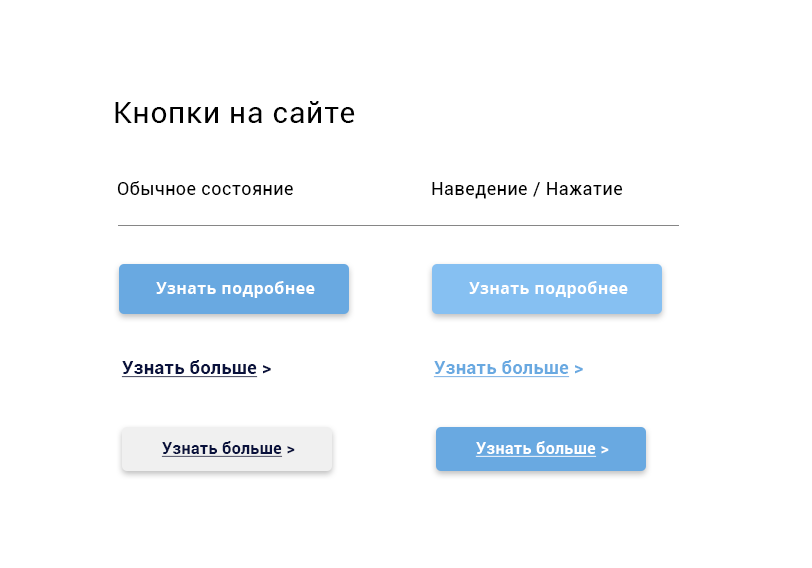
<style>
.page{position:relative;width:812px;height:568px;background:#ffffff}
.page>*{position:absolute;margin:0}
.t1{font:30px "Roboto-Regular";letter-spacing:0.025em;color:#000000}
.t2{font:18px "Roboto-Regular";letter-spacing:0.025em;color:#000000}
.t3{font:16px "OpenSans-Bold";letter-spacing:0.025em;color:#ffffff}
.t4{font:18px "Roboto-Bold";letter-spacing:0.025em;color:#09113c;text-decoration:underline}
.t5{font:18px "Roboto-Bold";letter-spacing:0.025em;color:#09113c}
.t6{font:18px "Roboto-Bold";letter-spacing:0.025em;color:#69a9e1;text-decoration:underline}
.t7{font:18px "Roboto-Bold";letter-spacing:0.025em;color:#69a9e1}
.t8{font:16px "Roboto-Bold";letter-spacing:0.025em;color:#09113c;text-decoration:underline}
.t9{font:16px "Roboto-Bold";letter-spacing:0.025em;color:#09113c}
.t10{font:16px "Roboto-Bold";letter-spacing:0.025em;color:#ffffff;text-decoration:underline}
.t11{font:16px "Roboto-Bold";letter-spacing:0.025em;color:#ffffff}
</style>
<div class="page">
<p class="t1" style="left:115px;top:101px;width:240px;height:22px">Кнопки на сайте</p>
<p class="t2" style="left:117px;top:181px;width:176px;height:14px">Обычное состояние</p>
<p class="t2" style="left:432px;top:182px;width:191px;height:17px">Наведение / Нажатие</p>
<p class="t3" style="left:156px;top:281px;width:159px;height:17px">Узнать подробнее</p>
<p class="t3" style="left:469px;top:281px;width:159px;height:17px">Узнать подробнее</p>
<p class="t4" style="left:121px;top:360px;width:150px;height:18px">Узнать больше<span class="t5"> &gt;</span></p>
<p class="t6" style="left:433px;top:360px;width:150px;height:18px">Узнать больше<span class="t7"> &gt;</span></p>
<p class="t8" style="left:161px;top:441px;width:134px;height:16px">Узнать больше<span class="t9"> &gt;</span></p>
<p class="t10" style="left:475px;top:441px;width:134px;height:16px">Узнать больше<span class="t11"> &gt;</span></p>
</div>
